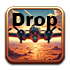
<style>
.page{position:relative;width:70px;height:70px;background:#ffffff}
.page>*{position:absolute;margin:0}
.t1{font:18px "Arial-Black";color:#000000}
</style>
<div class="page">
<p class="t1" style="left:12px;top:13px;width:46px;height:17px">Drop</p>
</div>
